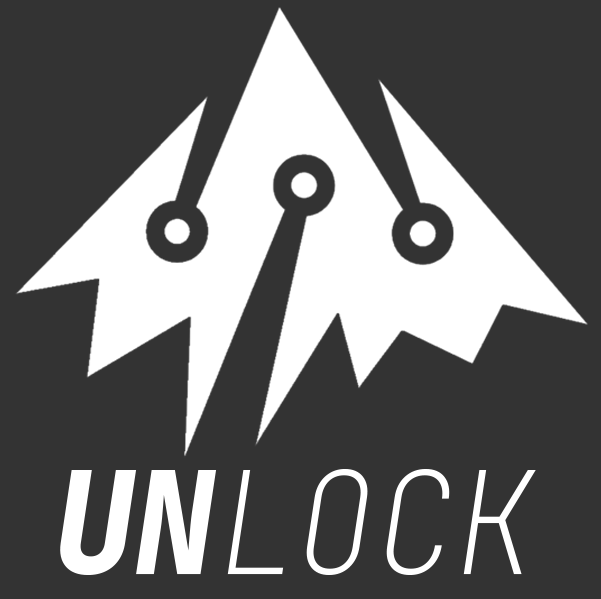
<style>
.page{position:relative;width:601px;height:599px;background:#333333}
.page>*{position:absolute;margin:0}
.t1{font:141.5px "JetBrainsMono-ThinItalic";color:#ffffff;scale:0.95 1}
.t2{font:141.5px "JetBrainsMono-ExtraBoldItalic";color:#ffffff;scale:0.95 1}
</style>
<div class="page">
<p class="t1" style="left:60px;top:469px;width:476px;height:106px"><span class="t2">UN</span>LOCK</p>
</div>
